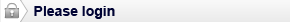
<style>
.page{position:relative;width:290px;height:22px}
.page>*{position:absolute;margin:0}
.t1{font:14px "Arial-BoldMT";color:#000333}
</style>
<div class="page">
<p class="t1" style="left:34px;top:6px;width:81px;height:13px">Please login</p>
</div>
